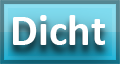
<style>
.page{position:relative;width:120px;height:64px}
.page>*{position:absolute;margin:0}
.t1{font:44.4px "Calibri-Bold";color:#ffffff}
</style>
<div class="page">
<p class="t1" style="left:13px;top:15px;width:92px;height:30px">Dicht</p>
</div>
